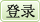
<style>
.page{position:relative;width:40px;height:22px}
.page>*{position:absolute;margin:0}
.t1{font:15px "SimSun";color:#050505}
</style>
<div class="page">
<p class="t1" style="left:6px;top:4px;width:29px;height:14px">登录</p>
</div>
